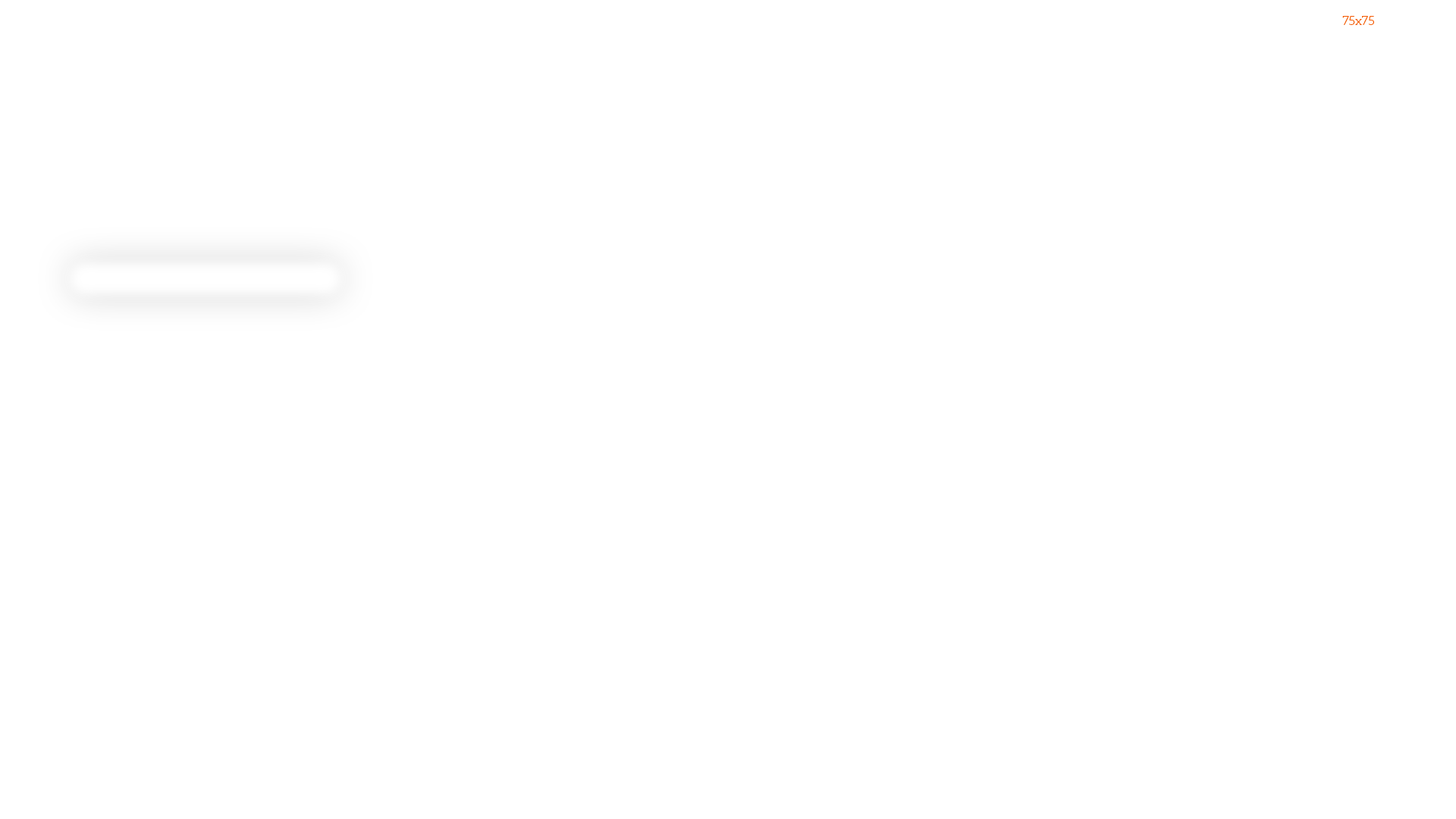
<style>
.page{position:relative;width:1456px;height:819px;background:#ffffff}
.page>*{position:absolute;margin:0}
.t1{font:12.1px "Aleo-Light";letter-spacing:-0.01em;color:#f45900}
</style>
<div class="page">
<p class="t1" style="left:1342px;top:16px;width:32px;height:9px">75x75</p>
</div>
